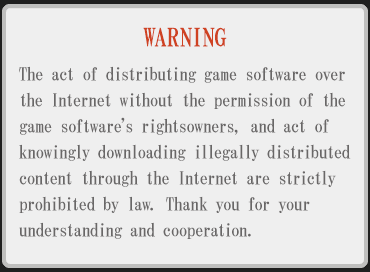
<style>
.page{position:relative;width:370px;height:272px;background:#efefef}
.page>*{position:absolute;margin:0}
.t1{font:25px "HGMinchoB";color:#cf4222}
.t2{font:18px/26px "HGMinchoB";letter-spacing:-0.05em;color:#696767}
</style>
<div class="page">
<p class="t1" style="left:143px;top:27px;width:84px;height:20px">WARNING</p>
<p class="t2" style="left:19px;top:66px;width:332px;height:173px">The act of distributing game software over<br>the Internet without the permission of the<br>game software's rightsowners, and act of<br>knowingly downloading illegally distributed<br>content through the Internet are strictly<br>prohibited by law. Thank you for your<br>understanding and cooperation.</p>
</div>
